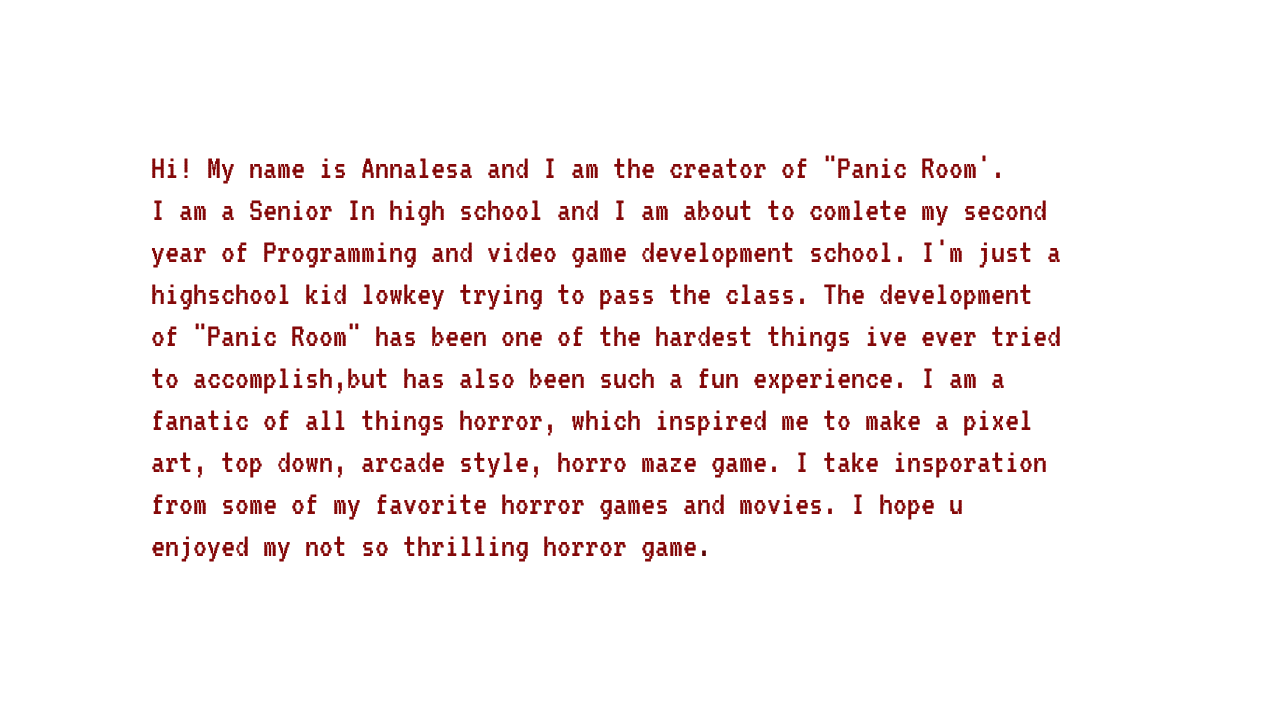
<style>
.page{position:relative;width:1280px;height:720px;background:#ffffff}
.page>*{position:absolute;margin:0}
.t1{font:35px "VT323-Regular";color:#840808}
.t2{font:35px "VT323-Regular";color:#5a0505}
</style>
<div class="page">
<p class="t1" style="left:151px;top:155px;width:909px;height:407px">Hi! My name is Annalesa and I am the creator of "Panic Room'.<br>I am a Senior In high school and I am about to comlete my second year of Programming and video game development school. I'm just a highschool kid lowkey trying to pass the class. The development of "Panic Room" has been one of the hardest things ive ever tried to accomplish,but has also been such a fun experience. I am a fanatic of all things horror, which inspired me to make a pixel art, top down, arcade style, horro maze game. I take insporation from some of my favorite horror games and movies. I hope u enjoyed my not so thrilling horror game<span class="t2">.</span></p>
</div>
